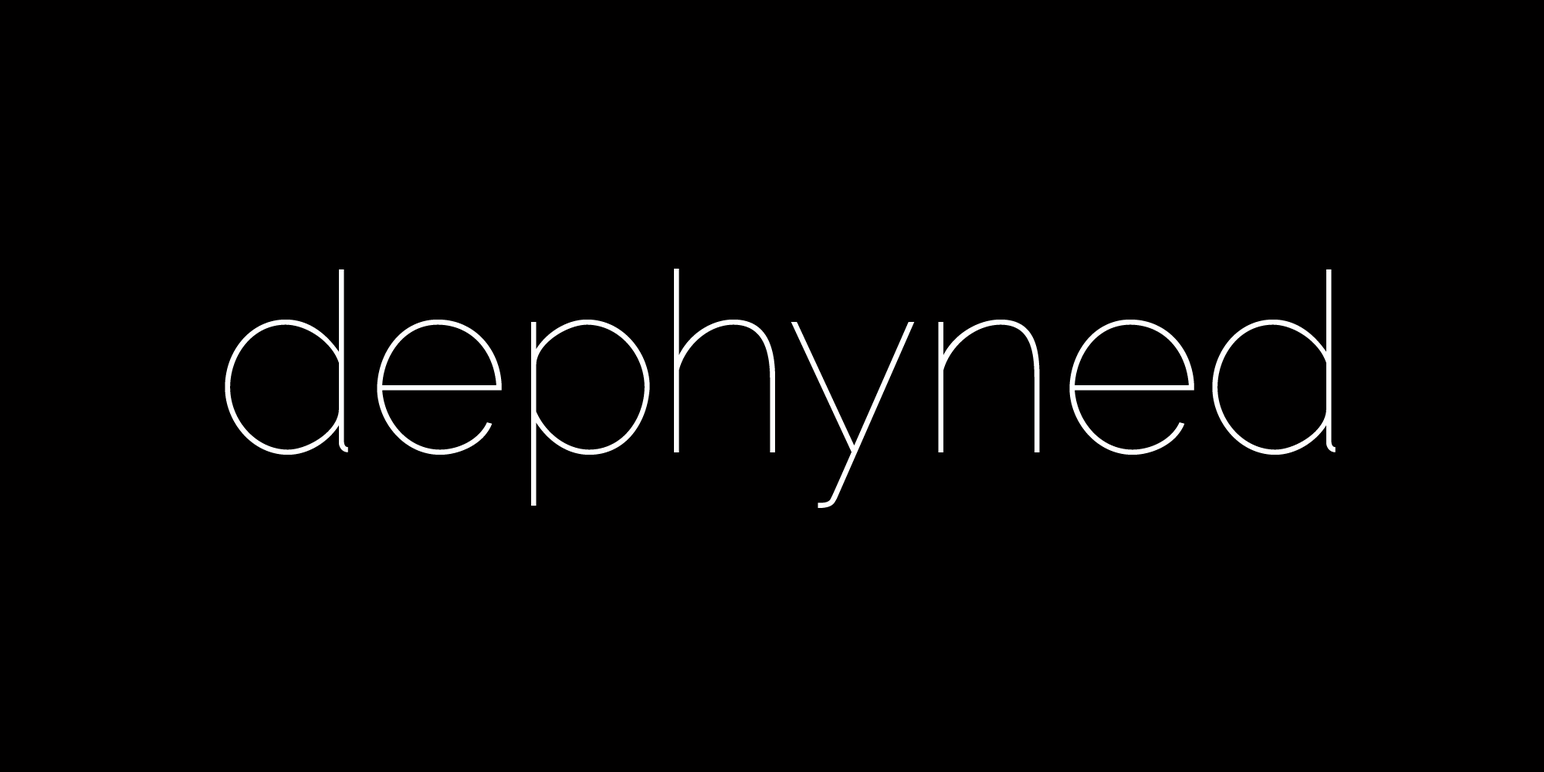
<style>
.page{position:relative;width:1544px;height:772px;background:#010000}
.page>*{position:absolute;margin:0}
.t1{font:250.9px "Raleway-Thin";color:#ffffff}
</style>
<div class="page">
<p class="t1" style="left:225px;top:269px;width:1111px;height:239px">dephyned</p>
</div>
